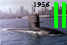
<style>
.page{position:relative;width:67px;height:45px}
.page>*{position:absolute;margin:0}
.t1{font:10.3px "Aparajita-Bold";color:#000000}
</style>
<div class="page">
<p class="t1" style="left:33px;top:2px;width:17px;height:5px">1956</p>
</div>
